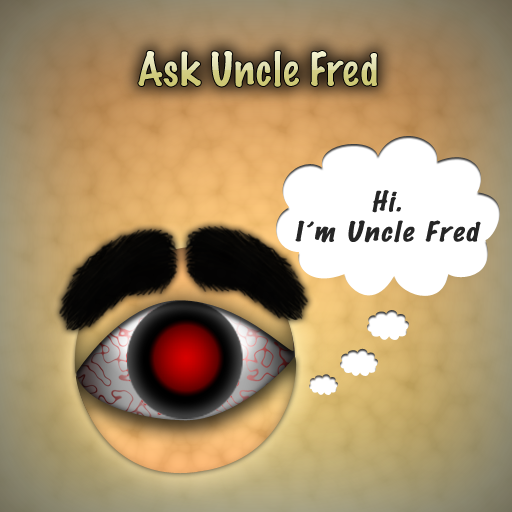
<style>
.page{position:relative;width:512px;height:512px}
.page>*{position:absolute;margin:0}
.t1{font:41.7px "MarkerFelt-Thin"}
.t2{font:25px "MarkerFelt-Thin";letter-spacing:0.07em;color:#262626;font-style:italic;scale:1.18 1}
</style>
<div class="page">
<p class="t1" style="left:138px;top:51px;width:240px;height:36px">Ask Uncle Fred</p>
<p class="t2" style="left:295px;top:190px;width:186px;height:53px;text-align:center">Hi.<br>I’m Uncle Fred</p>
</div>
